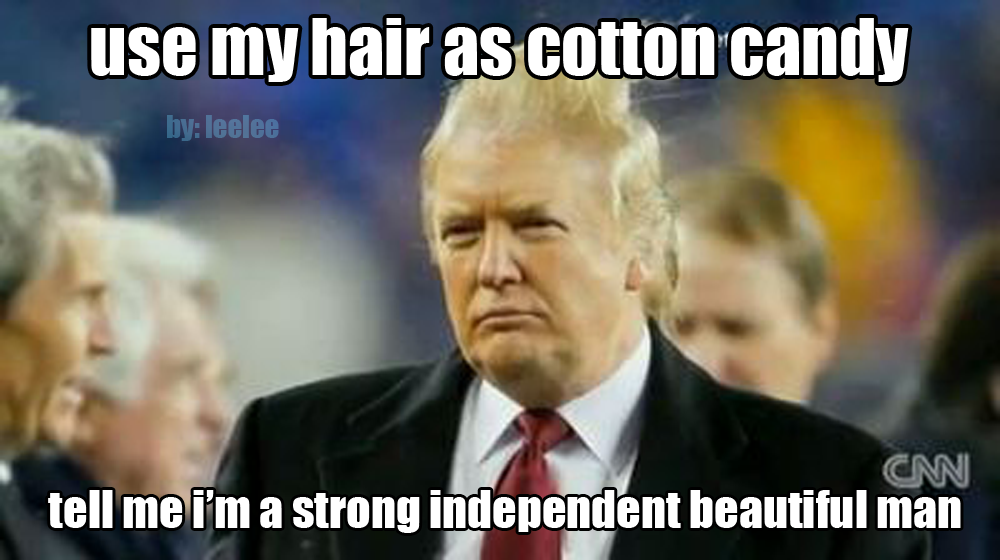
<style>
.page{position:relative;width:1000px;height:560px}
.page>*{position:absolute;margin:0}
.t1{font:72px "Impact";color:#ffffff}
.t2{font:28.8px "Impact";color:#4f7197}
.t3{font:48px "Impact";color:#ffffff}
</style>
<div class="page">
<p class="t1" style="left:91px;top:18px;width:818px;height:64px">use my hair as cotton candy</p>
<p class="t2" style="left:167px;top:115px;width:112px;height:26px">by: leelee</p>
<p class="t3" style="left:48px;top:490px;width:913px;height:43px">tell me i’m a strong independent beautiful man</p>
</div>
